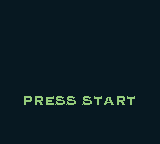
<style>
.page{position:relative;width:160px;height:144px;background:#071821}
.page>*{position:absolute;margin:0}
.t1{font:16px "Copperplate-Bold";color:#94cc7b}
</style>
<div class="page">
<p class="t1" style="left:24px;top:96px;width:111px;height:9px">PRESS START</p>
</div>
